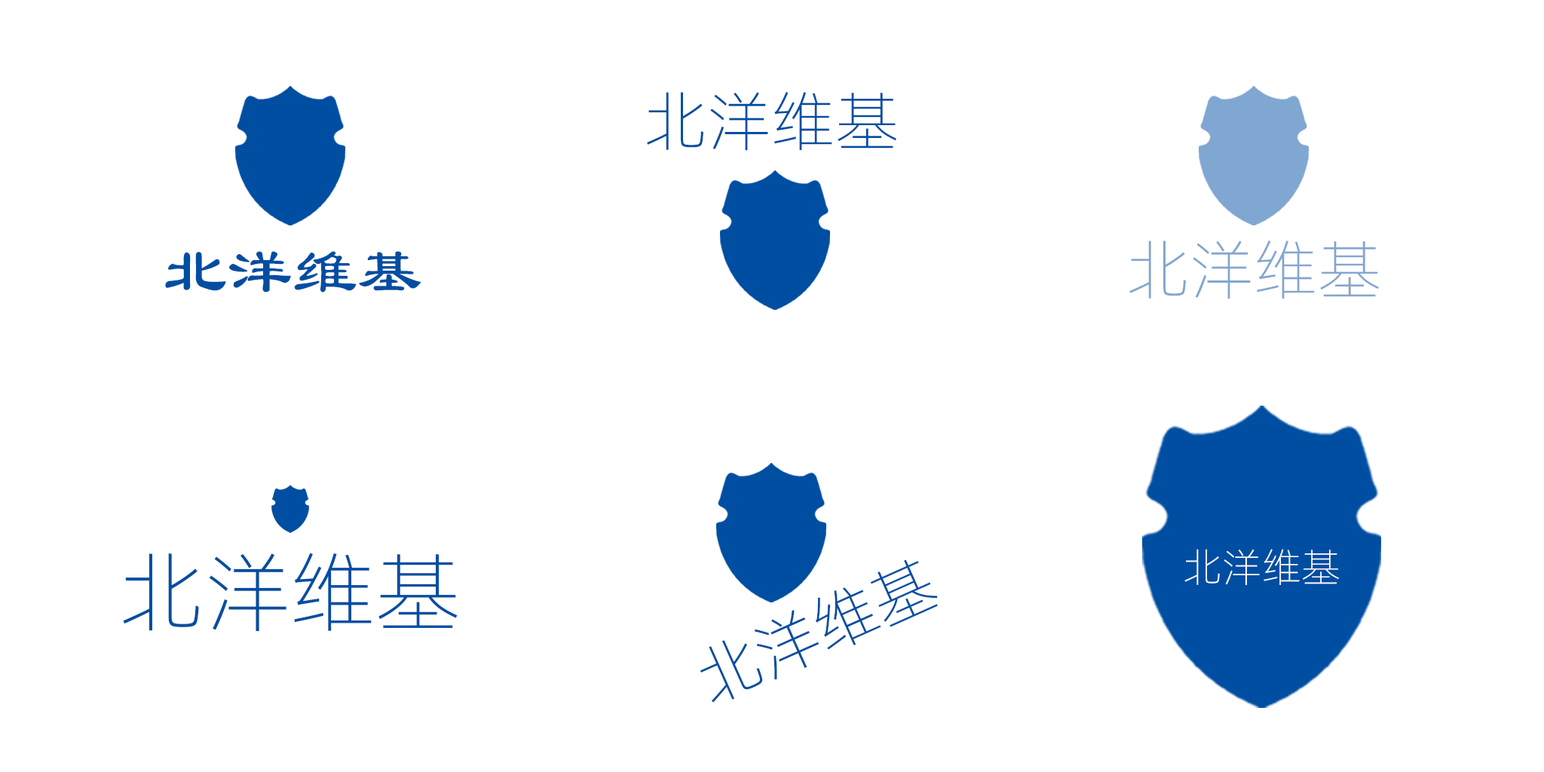
<style>
.page{position:relative;width:1544px;height:772px;background:#ffffff}
.page>*{position:absolute;margin:0}
.t1{font:64.8px "Alibaba-PuHuiTi-L";color:#004ea2}
.t2{font:64.8px "Alibaba-PuHuiTi-L";color:#80a7d1}
.t3{font:64.8px "LiSu";color:#004ea2}
.t4{font:86.9px "Alibaba-PuHuiTi-L";color:#004ea2}
.t5{font:40px "Alibaba-PuHuiTi-L";color:#ffffff}
</style>
<div class="page">
<p class="t1" style="left:647px;top:92px;width:250px;height:59px">北洋维基</p>
<p class="t2" style="left:1130px;top:241px;width:249px;height:58px">北洋维基</p>
<p class="t3" style="left:165px;top:251px;width:257px;height:42px">北洋维基</p>
<p class="t4" style="left:123px;top:553px;width:335px;height:79px">北洋维基</p>
<p class="t5" style="left:1185px;top:549px;width:154px;height:36px">北洋维基</p>
<p class="t1" style="left:701px;top:560px;width:237px;height:143px;rotate:-24deg">北洋维基</p>
</div>
